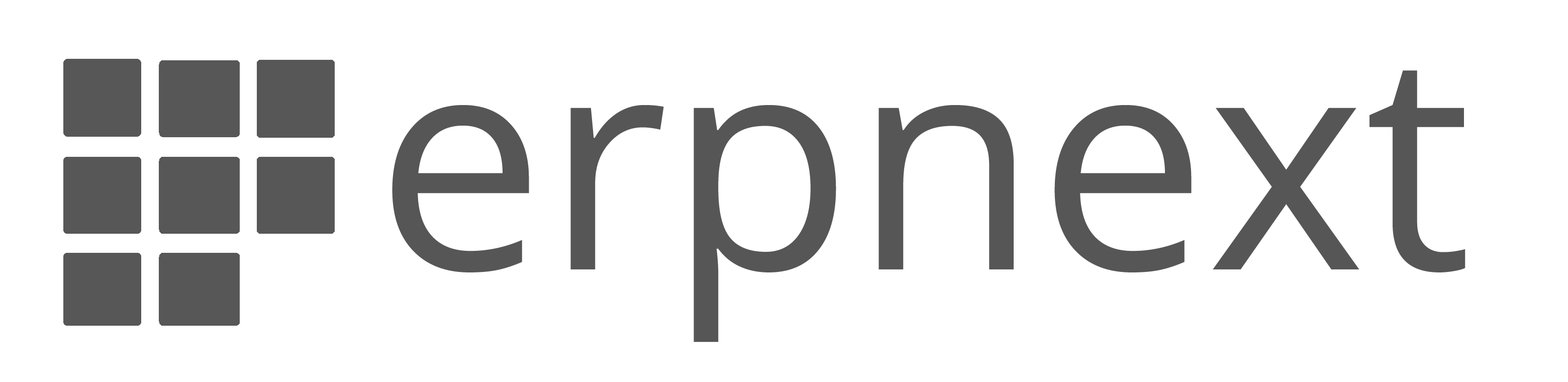
<style>
.page{position:relative;width:1568px;height:382px;background:#ffffff}
.page>*{position:absolute;margin:0}
.t1{font:301.5px "OpenSans";color:#565656}
</style>
<div class="page">
<p class="t1" style="left:392px;top:70px;width:1073px;height:272px">erpnext</p>
</div>
